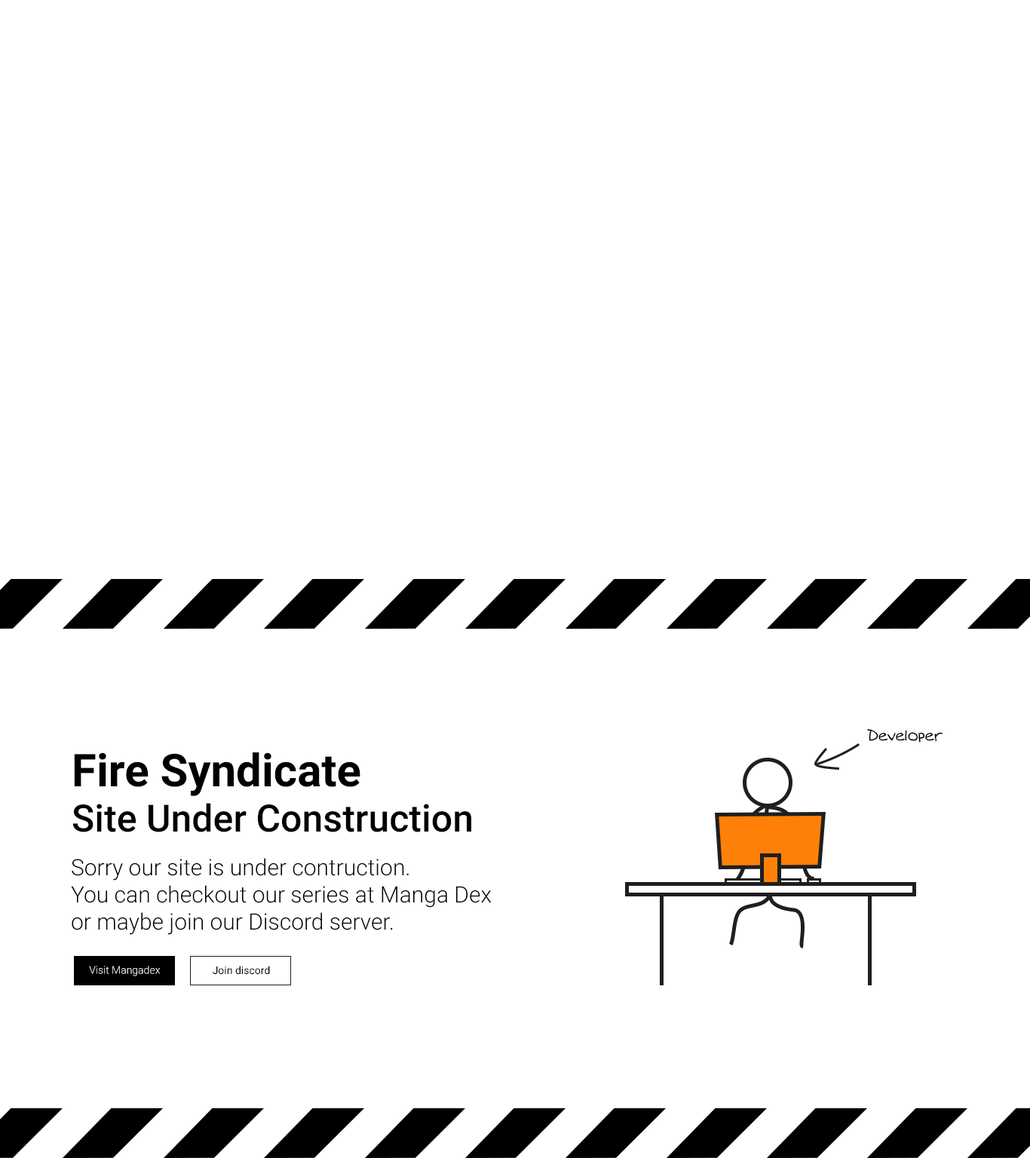
<style>
.page{position:relative;width:1030px;height:1158px;background:#ffffff}
.page>*{position:absolute;margin:0}
.t1{font:15.1px "Augie";color:#000000}
.t2{font:45.2px "Roboto-Bold";color:#000000}
.t3{font:37.7px "Roboto-Medium";color:#000000}
.t4{font:22.6px "Roboto-Light";color:#000000}
.t5{font:10.6px "Roboto-Light";color:#ffffff}
.t6{font:10.6px "Roboto-Regular";color:#000000}
</style>
<div class="page">
<p class="t1" style="left:867px;top:729px;width:75px;height:14px">Developer</p>
<p class="t2" style="left:74px;top:752px;width:286px;height:44px">Fire Syndicate</p>
<p class="t3" style="left:72px;top:803px;width:399px;height:29px">Site Under Construction</p>
<p class="t4" style="left:71px;top:858px;width:421px;height:77px">Sorry our site is under contruction.<br>You can checkout our series at Manga Dex<br>or maybe join our Discord server.</p>
<p class="t5" style="left:89px;top:966px;width:72px;height:10px">Visit Mangadex</p>
<p class="t6" style="left:213px;top:966px;width:57px;height:9px">Join discord</p>
</div>
